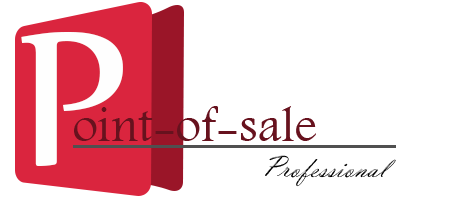
<style>
.page{position:relative;width:454px;height:209px;background:#ffffff}
.page>*{position:absolute;margin:0}
.t1{font:229px "Nyala-Regular";color:#fefefe}
.t2{font:50px "Andalus";color:#67121e}
.t3{font:29.9px "VladimirScript"}
</style>
<div class="page">
<p class="t1" style="left:21px;top:31px;width:102px;height:135px">P</p>
<p class="t2" style="left:74px;top:106px;width:242px;height:35px">oint-of-sale</p>
<p class="t3" style="left:265px;top:155px;width:131px;height:32px;rotate:1deg">Professional</p>
</div>
